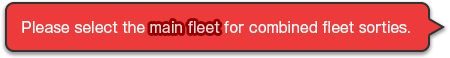
<style>
.page{position:relative;width:450px;height:58px;background:#ed3b3b}
.page>*{position:absolute;margin:0}
.t1{font:14px "GothicMB101Pro-Regular";color:#ffffff}
.t2{font:14px "GothicMB101Pro-Regular";color:#ffd3d3}
</style>
<div class="page">
<p class="t1" style="left:22px;top:21px;width:388px;height:12px">Please select the <span class="t2">main fleet</span> for combined fleet sorties.</p>
<p class="t1" style="left:22px;top:21px;width:388px;height:12px">Please select the <span class="t2">main fleet</span> for combined fleet sorties.</p>
</div>
